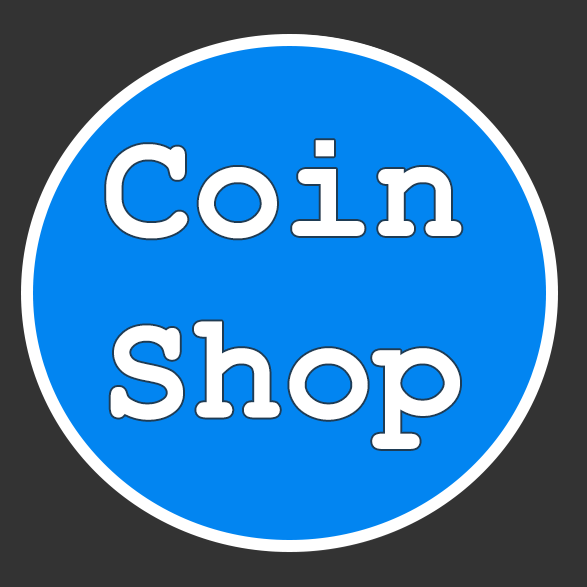
<style>
.page{position:relative;width:587px;height:587px;background:#0285f1}
.page>*{position:absolute;margin:0}
.t1{font:151.1px "CourierNewPS-BoldMT";color:#ffffff}
</style>
<div class="page">
<p class="t1" style="left:106px;top:140px;width:356px;height:309px;text-align:center">Coin<br>Shop</p>
</div>
